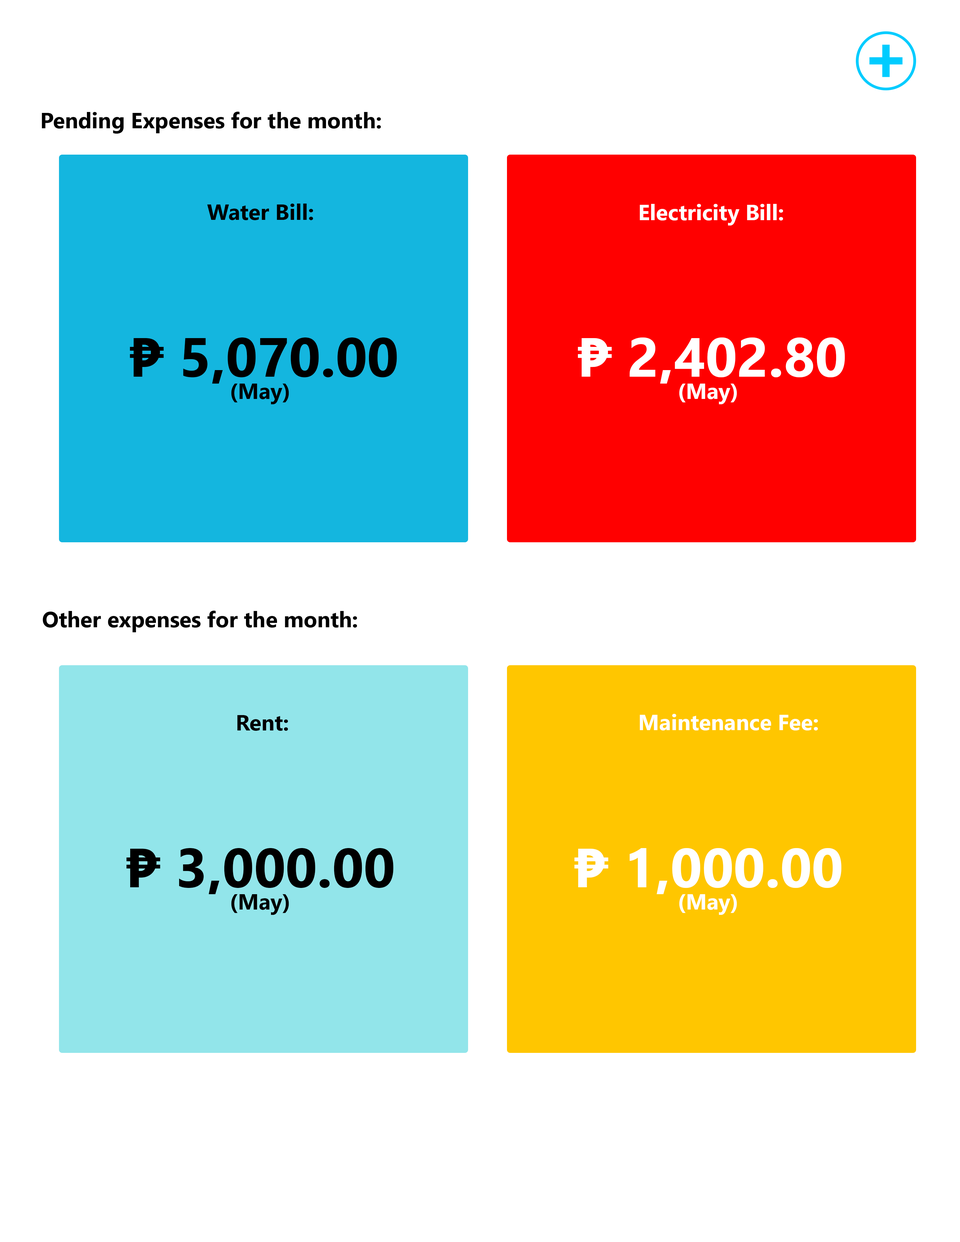
<style>
.page{position:relative;width:960px;height:1242px;background:#ffffff}
.page>*{position:absolute;margin:0}
.t1{font:22px "SegoeUI-Bold";color:#000000}
.t2{font:22px "SegoeUI-Bold";color:#ffffff}
.t3{font:54.9px "SegoeUI-Bold";color:#000000}
.t4{font:54.9px "SegoeUI-Bold";color:#ffffff}
</style>
<div class="page">
<p class="t1" style="left:42px;top:112px;width:339px;height:22px">Pending Expenses for the month:</p>
<p class="t1" style="left:207px;top:204px;width:106px;height:16px">Water Bill:</p>
<p class="t2" style="left:640px;top:204px;width:143px;height:22px">Electricity Bill:</p>
<p class="t3" style="left:130px;top:338px;width:267px;height:46px">₱ 5,070.00</p>
<p class="t4" style="left:578px;top:338px;width:267px;height:46px">₱ 2,402.80</p>
<p class="t1" style="left:231px;top:384px;width:58px;height:20px">(May)</p>
<p class="t2" style="left:679px;top:384px;width:58px;height:20px">(May)</p>
<p class="t1" style="left:43px;top:611px;width:314px;height:21px">Other expenses for the month:</p>
<p class="t2" style="left:640px;top:714px;width:178px;height:17px">Maintenance Fee:</p>
<p class="t1" style="left:237px;top:715px;width:51px;height:16px">Rent:</p>
<p class="t3" style="left:126px;top:848px;width:267px;height:46px">₱ 3,000.00</p>
<p class="t4" style="left:574px;top:848px;width:267px;height:46px">₱ 1,000.00</p>
<p class="t1" style="left:231px;top:894px;width:58px;height:21px">(May)</p>
<p class="t2" style="left:679px;top:894px;width:58px;height:21px">(May)</p>
</div>
